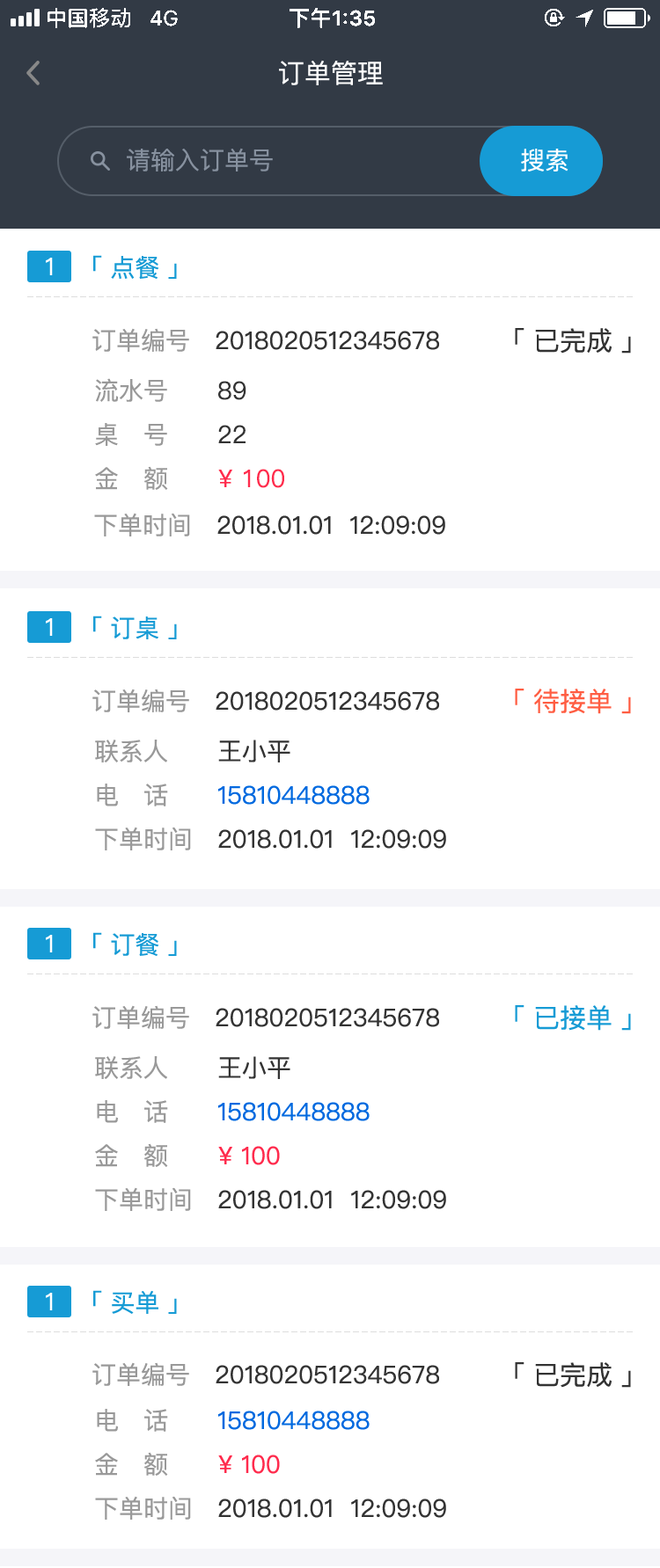
<style>
.page{position:relative;width:660px;height:1568px;background:#ffffff}
.page>*{position:absolute;margin:0}
.t1{font:26.4px "PingFangSC-Regular";color:#ffffff}
.t2{font:24.6px "PingFangSC-Regular";color:#87919f}
.t3{font:24.6px "PingFangSC-Regular";color:#ffffff}
.t4{font:24.6px "PingFangSC-Regular";color:#169bd5}
.t5{font:24.6px "PingFangSC-Regular";color:#333333}
.t6{font:24.6px "PingFangSC-Regular";color:#999999}
.t7{font:26.4px "PingFangSC-Regular";color:#333333}
.t8{font:24.6px/44px "PingFang-SC-Medium";color:#999999}
.t9{font:24.6px/44px "PingFang-SC-Medium";color:#333333}
.t10{font:24.6px/44px "PingFang-SC-Medium";color:#ff2b4d}
.t11{font:26.4px "PingFangSC-Regular";color:#ff5d42}
.t12{font:24.6px/44px "PingFangSC-Regular";color:#999999}
.t13{font:24.6px/44px "PingFangSC-Regular";color:#333333}
.t14{font:24.6px/44px "PingFangSC-Regular";color:#0069df}
.t15{font:26.4px "PingFangSC-Regular";color:#169bd5}
.t16{font:24.6px/44px "PingFangSC-Regular";color:#ff2b4d}
</style>
<div class="page">
<p class="t1" style="left:279px;top:60px;width:104px;height:25px">订单管理</p>
<p class="t2" style="left:127px;top:148px;width:146px;height:23px">请输入订单号</p>
<p class="t3" style="left:521px;top:149px;width:47px;height:22px">搜索</p>
<p class="t3" style="left:46px;top:258px;width:7px;height:17px">1</p>
<p class="t4" style="left:93px;top:255px;width:84px;height:24px">「 点餐 」</p>
<p class="t5" style="left:92px;top:328px;width:347px;height:24px"><span class="t6">订单编号   </span>2018020512345678</p>
<p class="t7" style="left:514px;top:328px;width:117px;height:26px">「 已完成 」</p>
<p class="t8" style="left:95px;top:378px;width:189px;height:112px">流水号      <span class="t9">89<br></span>桌   号      <span class="t9">22<br></span>金   额       <span class="t10">¥ 100</span></p>
<p class="t5" style="left:94px;top:513px;width:351px;height:23px"><span class="t6">下单时间   </span>2018.01.01  12:09:09</p>
<p class="t4" style="left:93px;top:616px;width:84px;height:23px">「 订桌 」</p>
<p class="t3" style="left:46px;top:618px;width:7px;height:18px">1</p>
<p class="t5" style="left:92px;top:689px;width:347px;height:23px"><span class="t6">订单编号   </span>2018020512345678</p>
<p class="t11" style="left:514px;top:689px;width:117px;height:25px">「 待接单 」</p>
<p class="t5" style="left:95px;top:740px;width:351px;height:110px"><span class="t12">联系人      </span><span class="t13">王小平<br></span><span class="t6">电   话      </span><span class="t14">15810448888<br></span><span class="t6">下单时间   </span>2018.01.01  12:09:09</p>
<p class="t3" style="left:46px;top:935px;width:7px;height:17px">1</p>
<p class="t4" style="left:93px;top:932px;width:84px;height:24px">「 订餐 」</p>
<p class="t5" style="left:92px;top:1005px;width:347px;height:24px"><span class="t6">订单编号   </span>2018020512345678</p>
<p class="t15" style="left:514px;top:1005px;width:117px;height:26px">「 已接单 」</p>
<p class="t5" style="left:95px;top:1056px;width:351px;height:155px"><span class="t12">联系人      </span><span class="t13">王小平<br></span><span class="t6">电   话      </span><span class="t14">15810448888<br></span><span class="t12">金   额       </span><span class="t16">¥ 100<br></span><span class="t6">下单时间   </span>2018.01.01  12:09:09</p>
<p class="t3" style="left:46px;top:1293px;width:7px;height:17px">1</p>
<p class="t4" style="left:93px;top:1290px;width:84px;height:24px">「 买单 」</p>
<p class="t5" style="left:92px;top:1362px;width:347px;height:24px"><span class="t6">订单编号   </span>2018020512345678</p>
<p class="t7" style="left:514px;top:1362px;width:117px;height:26px">「 已完成 」</p>
<p class="t5" style="left:95px;top:1409px;width:351px;height:111px"><span class="t6">电   话      </span><span class="t14">15810448888<br></span><span class="t12">金   额       </span><span class="t16">¥ 100<br></span><span class="t6">下单时间   </span>2018.01.01  12:09:09</p>
</div>
